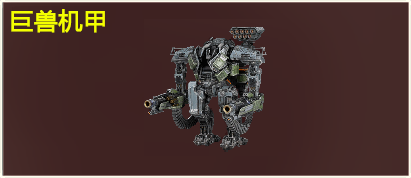
<style>
.page{position:relative;width:411px;height:178px}
.page>*{position:absolute;margin:0}
.t1{font:24px "MicrosoftYaHei";color:#f4ff00;font-weight:bold}
</style>
<div class="page">
<p class="t1" style="left:11px;top:9px;width:94px;height:24px">巨兽机甲</p>
</div>
